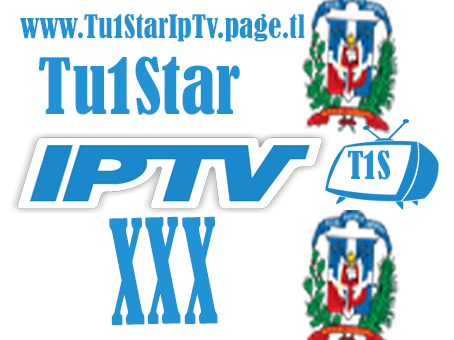
<style>
.page{position:relative;width:454px;height:340px;background:#ffffff}
.page>*{position:absolute;margin:0}
.t1{font:30px "BernardMT-Condensed";color:#2192d4}
.t2{font:72px "BernardMT-Condensed";color:#2192d4}
.t3{font:36px "BernardMT-Condensed";color:#2192d4}
.t4{font:159.5px "BernardMT-Condensed";color:#2192d4;scale:0.53 1}
</style>
<div class="page">
<p class="t1" style="left:20px;top:14px;width:285px;height:28px">www.Tu1StarIpTv.page.tl</p>
<p class="t2" style="left:39px;top:56px;width:201px;height:59px">Tu1Star</p>
<p class="t3" style="left:347px;top:150px;width:43px;height:30px">T1S</p>
<p class="t4" style="left:109px;top:216px;width:109px;height:109px;text-align:center;rotate:-1deg">xxx<br>xxx</p>
</div>
